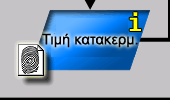
<style>
.page{position:relative;width:170px;height:100px;background:#c6c3c6}
.page>*{position:absolute;margin:0}
.t1{font:14.7px "ArialMT";color:#000000}
</style>
<div class="page">
<p class="t1" style="left:42px;top:33px;width:96px;height:15px">Τιμή κατακερμ.</p>
</div>
